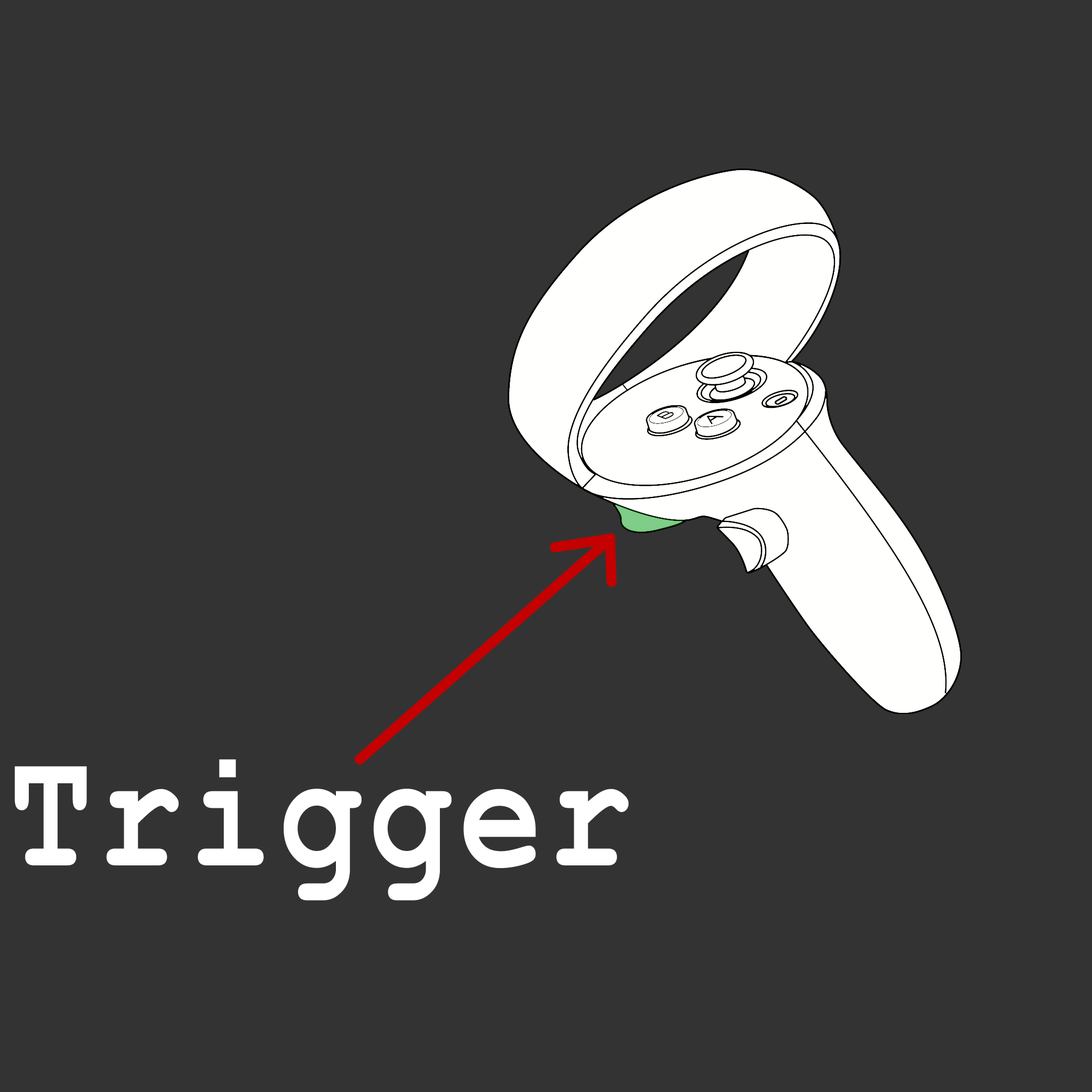
<style>
.page{position:relative;width:1092px;height:1092px;background:#333333}
.page>*{position:absolute;margin:0}
.t1{font:167.1px "CourierNewPS-BoldMT";letter-spacing:0.05em;color:#ffffff;scale:0.83 1}
</style>
<div class="page">
<p class="t1" style="left:14px;top:759px;width:615px;height:142px">Trigger</p>
</div>
